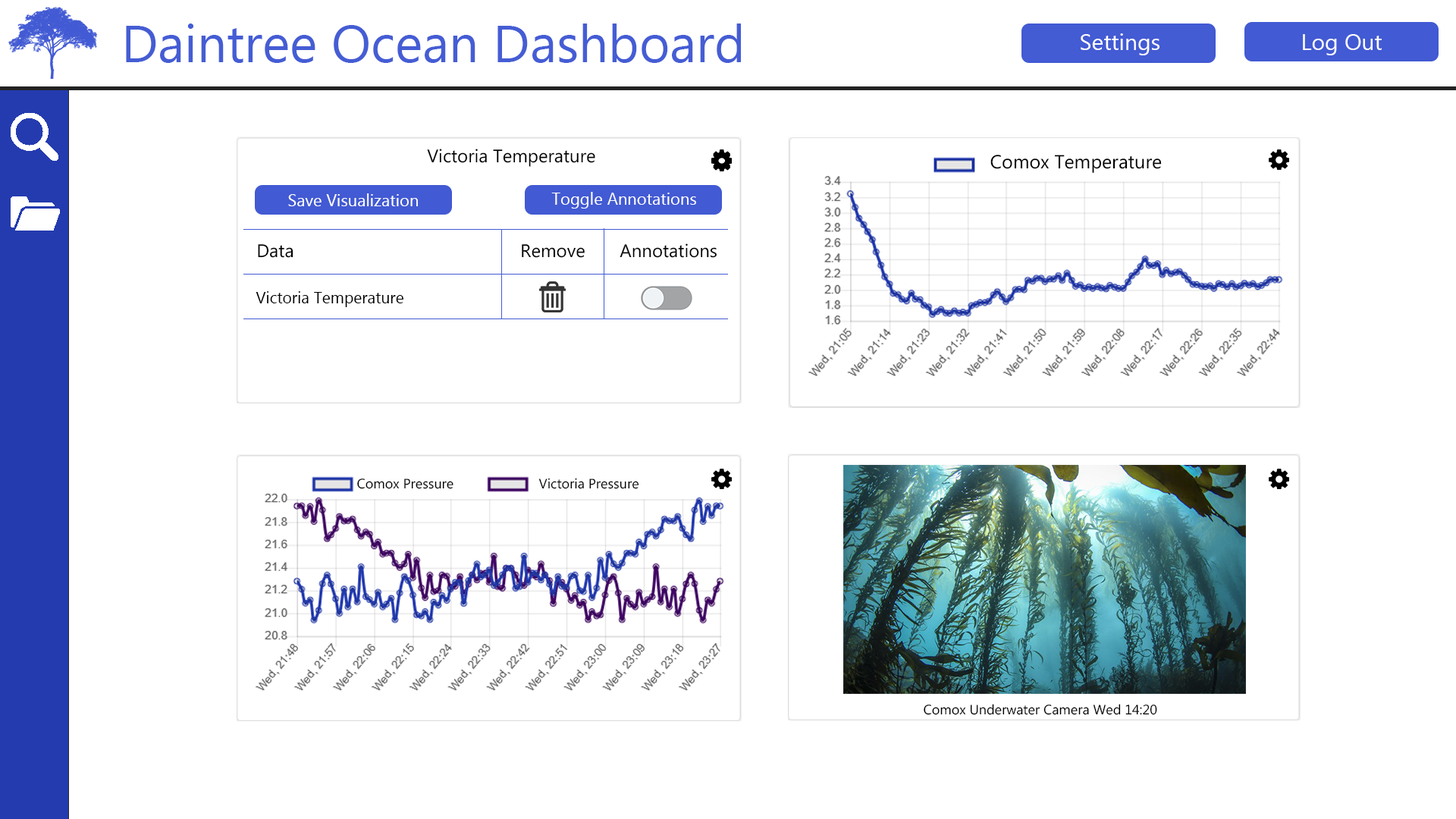
<style>
.page{position:relative;width:1456px;height:819px;background:#ffffff}
.page>*{position:absolute;margin:0}
.t1{font:52.3px "MyanmarText";color:#455dd4}
.t2{font:22.7px "MyanmarText";color:#ffffff}
.t3{font:18.2px "MyanmarText";color:#000000}
.t4{font:19px "MyanmarText";color:#000000}
.t5{font:16.7px "MyanmarText";color:#ffffff}
.t6{font:16px "MyanmarText";color:#000000}
.t7{font:13.6px "MyanmarText";color:#000000}
</style>
<div class="page">
<p class="t1" style="left:126px;top:24px;width:615px;height:39px">Daintree Ocean Dashboard</p>
<p class="t2" style="left:1081px;top:33px;width:78px;height:22px">Settings</p>
<p class="t2" style="left:1303px;top:34px;width:79px;height:21px">Log Out</p>
<p class="t3" style="left:427px;top:149px;width:168px;height:18px">Victoria Temperature</p>
<p class="t4" style="left:990px;top:155px;width:172px;height:18px">Comox Temperature</p>
<p class="t5" style="left:288px;top:193px;width:130px;height:13px">Save Visualization</p>
<p class="t5" style="left:551px;top:192px;width:145px;height:17px">Toggle Annotations</p>
<p class="t3" style="left:258px;top:243px;width:459px;height:15px">Data                   Remove  Annotations</p>
<p class="t6" style="left:256px;top:291px;width:147px;height:16px">Victoria Temperature</p>
<p class="t7" style="left:357px;top:479px;width:96px;height:10px">Comox Pressure</p>
<p class="t7" style="left:538px;top:478px;width:101px;height:11px">Victoria Pressure</p>
<p class="t7" style="left:924px;top:704px;width:233px;height:11px">Comox Underwater Camera Wed 14:20</p>
</div>
